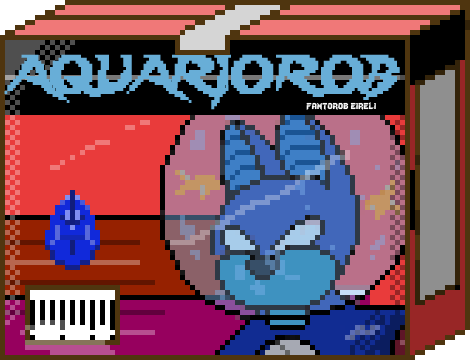
<style>
.page{position:relative;width:470px;height:360px}
.page>*{position:absolute;margin:0}
.t1{font:48.3px "Lady-Radical";color:#68aed7;scale:0.93 1}
.t2{font:12px "Lady-Radical";color:#fbfbfb}
</style>
<div class="page">
<p class="t1" style="left:4px;top:54px;width:396px;height:56px">AQUARIOROB</p>
<p class="t2" style="left:306px;top:102px;width:70px;height:8px">fantorob eireli</p>
</div>
